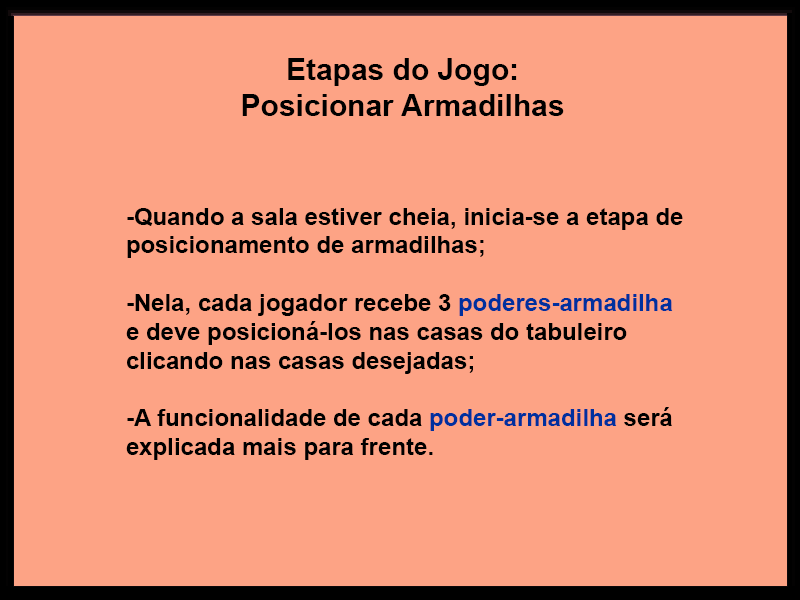
<style>
.page{position:relative;width:800px;height:600px;background:#fda385}
.page>*{position:absolute;margin:0}
.t1{font:30px "Arial-BoldMT";color:#000000}
.t2{font:24px "Arial-BoldMT";color:#000000}
.t3{font:24px "Arial-BoldMT";color:#00309e}
</style>
<div class="page">
<p class="t1" style="left:242px;top:58px;width:322px;height:58px;text-align:center">Etapas do Jogo: Posicionar Armadilhas</p>
<p class="t2" style="left:126px;top:208px;width:557px;height:252px">-Quando a sala estiver cheia, inicia-se a etapa de posicionamento de armadilhas;<br><br>-Nela, cada jogador recebe 3 <span class="t3">poderes-armadilha</span> e deve posicioná-los nas casas do tabuleiro clicando nas casas desejadas;<br><br>-A funcionalidade de cada <span class="t3">poder-armadilha</span> será explicada mais para frente.</p>
</div>
